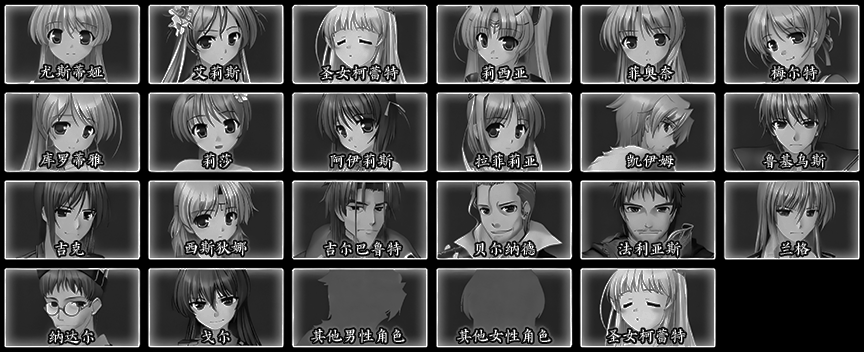
<style>
.page{position:relative;width:864px;height:352px;background:#000000}
.page>*{position:absolute;margin:0}
.t1{font:16px "AaYZQDBTBNon-CommercialUse";color:#ffffff}
</style>
<div class="page">
<p class="t1" style="left:40px;top:64px;width:63px;height:16px">尤斯蒂娅</p>
<p class="t1" style="left:193px;top:65px;width:47px;height:16px">艾莉斯</p>
<p class="t1" style="left:320px;top:65px;width:79px;height:15px">圣女柯蕾特</p>
<p class="t1" style="left:482px;top:65px;width:46px;height:15px">莉西亚</p>
<p class="t1" style="left:628px;top:65px;width:46px;height:16px">菲奥奈</p>
<p class="t1" style="left:770px;top:66px;width:48px;height:14px">梅尔特</p>
<p class="t1" style="left:40px;top:152px;width:63px;height:16px">库罗蒂雅</p>
<p class="t1" style="left:203px;top:153px;width:29px;height:15px">莉莎</p>
<p class="t1" style="left:330px;top:153px;width:63px;height:16px">阿伊莉斯</p>
<p class="t1" style="left:475px;top:153px;width:63px;height:16px">拉菲莉亚</p>
<p class="t1" style="left:627px;top:154px;width:47px;height:14px">凯伊姆</p>
<p class="t1" style="left:763px;top:153px;width:63px;height:16px">鲁基乌斯</p>
<p class="t1" style="left:55px;top:242px;width:29px;height:14px">吉克</p>
<p class="t1" style="left:185px;top:240px;width:62px;height:16px">西斯狄娜</p>
<p class="t1" style="left:324px;top:241px;width:78px;height:16px">吉尔巴鲁特</p>
<p class="t1" style="left:474px;top:241px;width:61px;height:15px">贝尔纳德</p>
<p class="t1" style="left:618px;top:241px;width:63px;height:16px">法利亚斯</p>
<p class="t1" style="left:780px;top:242px;width:30px;height:14px">兰格</p>
<p class="t1" style="left:311px;top:328px;width:94px;height:15px">其他男性角色</p>
<p class="t1" style="left:457px;top:328px;width:94px;height:15px">其他女性角色</p>
<p class="t1" style="left:607px;top:328px;width:79px;height:15px">圣女柯蕾特</p>
<p class="t1" style="left:49px;top:330px;width:45px;height:14px">纳达尔</p>
<p class="t1" style="left:202px;top:330px;width:28px;height:14px">戈尔</p>
</div>
